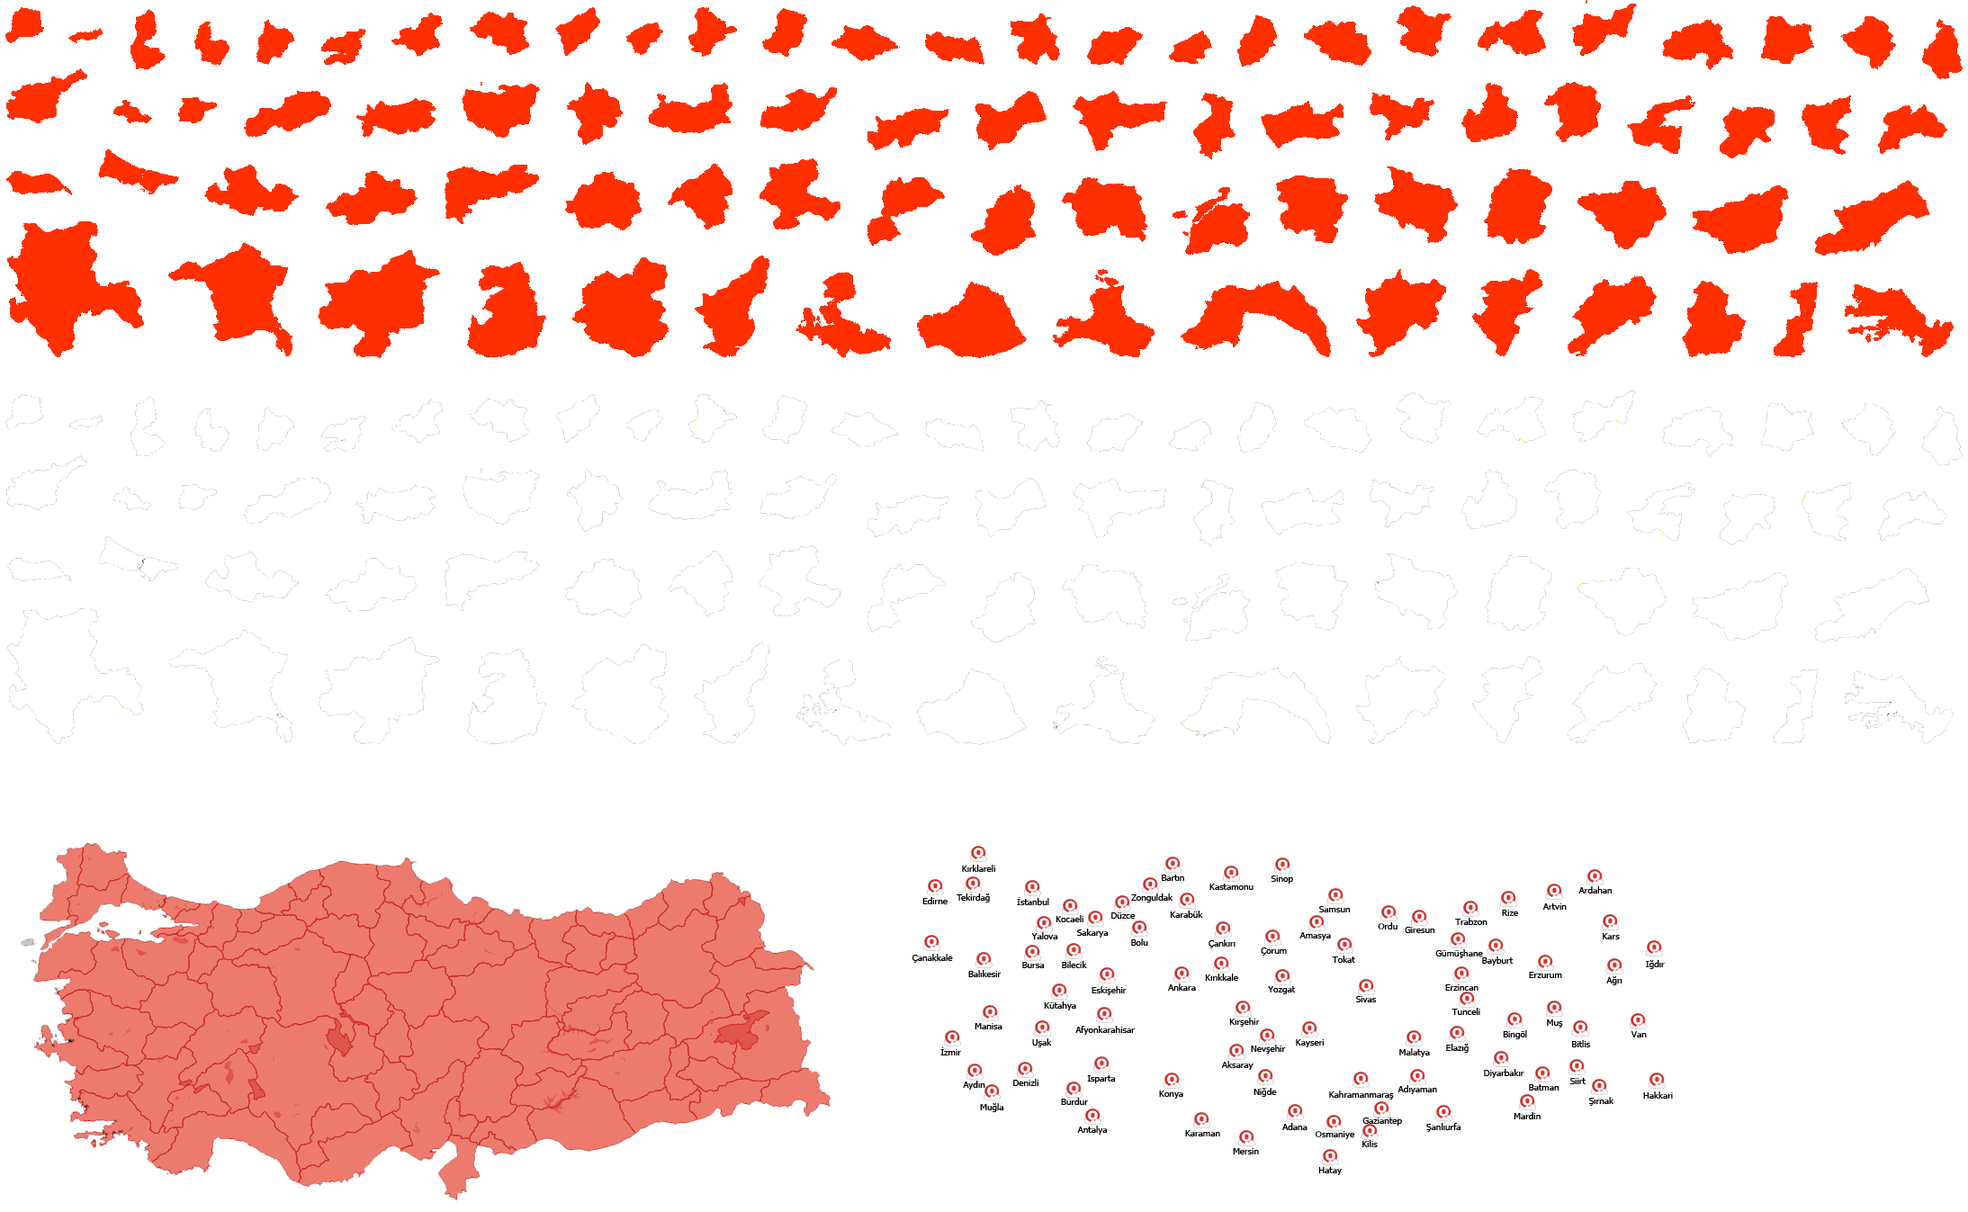
<style>
.page{position:relative;width:1968px;height:1212px;background:#ffffff}
.page>*{position:absolute;margin:0}
.t1{font:9px "Tahoma";color:#000000}
</style>
<div class="page">
<p class="t1" style="left:962px;top:865px;width:33px;height:7px">Kırklareli</p>
<p class="t1" style="left:1162px;top:875px;width:22px;height:6px">Bartın</p>
<p class="t1" style="left:1271px;top:876px;width:22px;height:8px">Sinop</p>
<p class="t1" style="left:957px;top:894px;width:33px;height:9px">Tekirdağ</p>
<p class="t1" style="left:1131px;top:894px;width:43px;height:9px">Zonguldak</p>
<p class="t1" style="left:1210px;top:884px;width:44px;height:6px">Kastamonu</p>
<p class="t1" style="left:1579px;top:886px;width:34px;height:8px">Ardahan</p>
<p class="t1" style="left:922px;top:897px;width:26px;height:7px">Edirne</p>
<p class="t1" style="left:1017px;top:897px;width:32px;height:8px">İstanbul</p>
<p class="t1" style="left:1543px;top:904px;width:24px;height:6px">Artvin</p>
<p class="t1" style="left:1056px;top:915px;width:28px;height:7px">Kocaeli</p>
<p class="t1" style="left:1112px;top:913px;width:24px;height:6px">Düzce</p>
<p class="t1" style="left:1170px;top:911px;width:33px;height:7px">Karabük</p>
<p class="t1" style="left:1319px;top:906px;width:32px;height:7px">Samsun</p>
<p class="t1" style="left:1455px;top:918px;width:33px;height:7px">Trabzon</p>
<p class="t1" style="left:1502px;top:910px;width:17px;height:6px">Rize</p>
<p class="t1" style="left:1077px;top:929px;width:32px;height:9px">Sakarya</p>
<p class="t1" style="left:1378px;top:922px;width:20px;height:8px">Ordu</p>
<p class="t1" style="left:1405px;top:927px;width:31px;height:6px">Giresun</p>
<p class="t1" style="left:1031px;top:932px;width:27px;height:8px">Yalova</p>
<p class="t1" style="left:1131px;top:939px;width:17px;height:7px">Bolu</p>
<p class="t1" style="left:1209px;top:940px;width:27px;height:9px">Çankırı</p>
<p class="t1" style="left:1300px;top:932px;width:31px;height:8px">Amasya</p>
<p class="t1" style="left:1603px;top:933px;width:17px;height:7px">Kars</p>
<p class="t1" style="left:1261px;top:948px;width:26px;height:8px">Çorum</p>
<p class="t1" style="left:1436px;top:950px;width:47px;height:8px">Gümüşhane</p>
<p class="t1" style="left:913px;top:954px;width:40px;height:9px">Çanakkale</p>
<p class="t1" style="left:1022px;top:962px;width:23px;height:6px">Bursa</p>
<p class="t1" style="left:1062px;top:961px;width:25px;height:7px">Bilecik</p>
<p class="t1" style="left:1332px;top:956px;width:23px;height:7px">Tokat</p>
<p class="t1" style="left:1482px;top:957px;width:32px;height:9px">Bayburt</p>
<p class="t1" style="left:1646px;top:960px;width:19px;height:9px">Iğdır</p>
<p class="t1" style="left:968px;top:970px;width:34px;height:7px">Balıkesir</p>
<p class="t1" style="left:1205px;top:974px;width:33px;height:7px">Kırıkkale</p>
<p class="t1" style="left:1529px;top:972px;width:33px;height:6px">Erzurum</p>
<p class="t1" style="left:1606px;top:976px;width:17px;height:10px">Ağrı</p>
<p class="t1" style="left:1092px;top:986px;width:35px;height:9px">Eskişehir</p>
<p class="t1" style="left:1168px;top:984px;width:28px;height:7px">Ankara</p>
<p class="t1" style="left:1268px;top:986px;width:28px;height:8px">Yozgat</p>
<p class="t1" style="left:1445px;top:985px;width:34px;height:6px">Erzincan</p>
<p class="t1" style="left:1044px;top:1002px;width:32px;height:9px">Kütahya</p>
<p class="t1" style="left:1356px;top:996px;width:21px;height:7px">Sivas</p>
<p class="t1" style="left:1452px;top:1008px;width:28px;height:7px">Tunceli</p>
<p class="t1" style="left:975px;top:1023px;width:28px;height:7px">Manisa</p>
<p class="t1" style="left:1229px;top:1018px;width:31px;height:9px">Kırşehir</p>
<p class="t1" style="left:1547px;top:1020px;width:16px;height:8px">Muş</p>
<p class="t1" style="left:1076px;top:1026px;width:59px;height:9px">Afyonkarahisar</p>
<p class="t1" style="left:1503px;top:1030px;width:24px;height:10px">Bingöl</p>
<p class="t1" style="left:1631px;top:1031px;width:16px;height:7px">Van</p>
<p class="t1" style="left:940px;top:1048px;width:21px;height:8px">İzmir</p>
<p class="t1" style="left:1032px;top:1039px;width:20px;height:9px">Uşak</p>
<p class="t1" style="left:1251px;top:1045px;width:35px;height:9px">Nevşehir</p>
<p class="t1" style="left:1296px;top:1040px;width:28px;height:8px">Kayseri</p>
<p class="t1" style="left:1400px;top:1048px;width:30px;height:10px">Malatya</p>
<p class="t1" style="left:1446px;top:1044px;width:23px;height:9px">Elazığ</p>
<p class="t1" style="left:1572px;top:1040px;width:19px;height:8px">Bitlis</p>
<p class="t1" style="left:1221px;top:1061px;width:33px;height:9px">Aksaray</p>
<p class="t1" style="left:1484px;top:1069px;width:41px;height:9px">Diyarbakır</p>
<p class="t1" style="left:963px;top:1081px;width:23px;height:9px">Aydın</p>
<p class="t1" style="left:1013px;top:1079px;width:26px;height:7px">Denizli</p>
<p class="t1" style="left:1087px;top:1076px;width:29px;height:8px">Isparta</p>
<p class="t1" style="left:1398px;top:1085px;width:39px;height:9px">Adıyaman</p>
<p class="t1" style="left:1529px;top:1084px;width:31px;height:7px">Batman</p>
<p class="t1" style="left:1570px;top:1078px;width:16px;height:6px">Siirt</p>
<p class="t1" style="left:1159px;top:1091px;width:25px;height:8px">Konya</p>
<p class="t1" style="left:1254px;top:1088px;width:23px;height:9px">Niğde</p>
<p class="t1" style="left:1329px;top:1091px;width:65px;height:9px">Kahramanmaraş</p>
<p class="t1" style="left:1589px;top:1097px;width:26px;height:9px">Şırnak</p>
<p class="t1" style="left:1643px;top:1092px;width:30px;height:7px">Hakkari</p>
<p class="t1" style="left:980px;top:1103px;width:24px;height:9px">Muğla</p>
<p class="t1" style="left:1061px;top:1098px;width:27px;height:7px">Burdur</p>
<p class="t1" style="left:1363px;top:1118px;width:39px;height:8px">Gaziantep</p>
<p class="t1" style="left:1514px;top:1112px;width:27px;height:8px">Mardin</p>
<p class="t1" style="left:1077px;top:1126px;width:31px;height:9px">Antalya</p>
<p class="t1" style="left:1185px;top:1130px;width:35px;height:7px">Karaman</p>
<p class="t1" style="left:1282px;top:1123px;width:26px;height:7px">Adana</p>
<p class="t1" style="left:1316px;top:1131px;width:39px;height:8px">Osmaniye</p>
<p class="t1" style="left:1426px;top:1123px;width:36px;height:9px">Şanlıurfa</p>
<p class="t1" style="left:1363px;top:1140px;width:15px;height:8px">Kilis</p>
<p class="t1" style="left:1233px;top:1148px;width:26px;height:7px">Mersin</p>
<p class="t1" style="left:1318px;top:1167px;width:24px;height:8px">Hatay</p>
</div>
